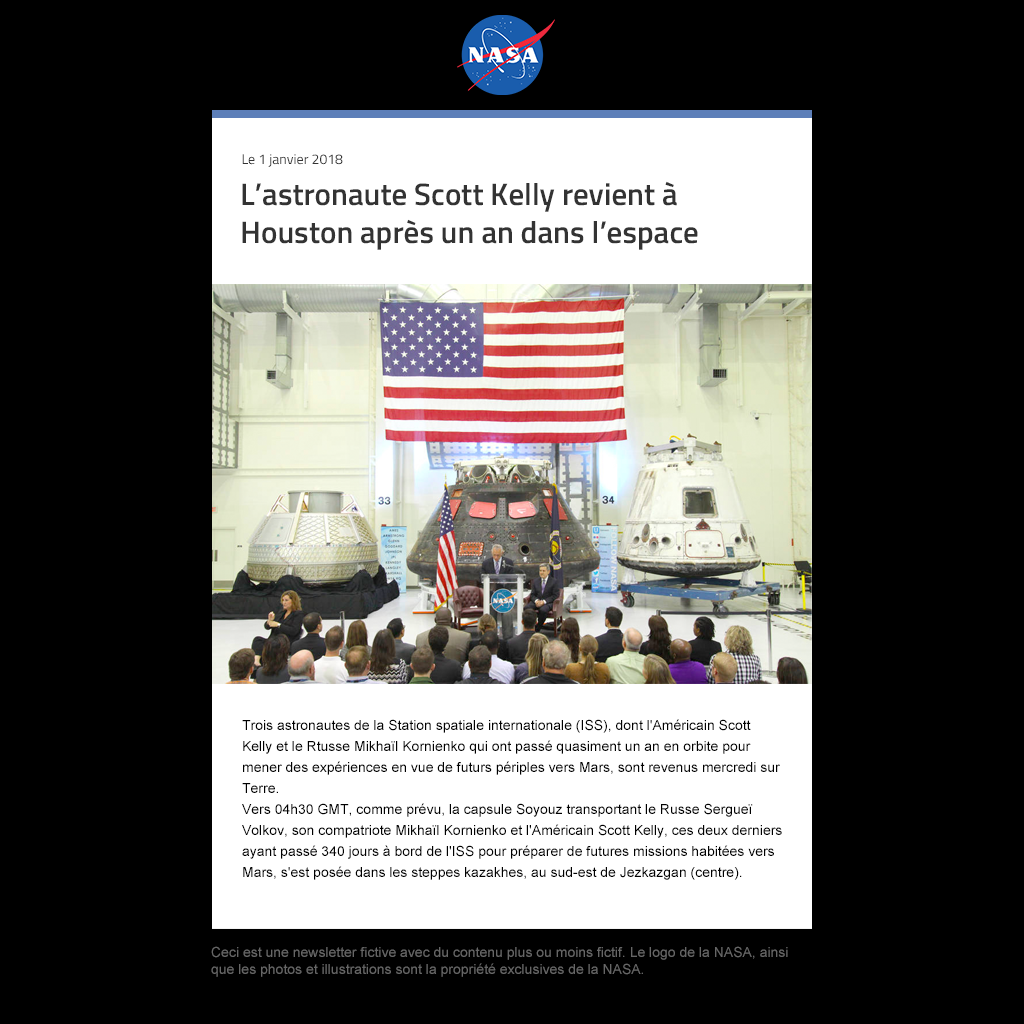
<style>
.page{position:relative;width:1024px;height:1024px;background:#000000}
.page>*{position:absolute;margin:0}
.t1{font:14px "TitilliumWeb-Regular";color:#333333}
.t2{font:31px "TitilliumWeb-SemiBold";color:#333333}
.t3{font:14px/21px "ArialMT";color:#000000}
.t4{font:14px "ArialMT";color:#666666}
</style>
<div class="page">
<p class="t1" style="left:242px;top:154px;width:101px;height:13px">Le 1 janvier 2018</p>
<p class="t2" style="left:242px;top:181px;width:456px;height:69px">L’astronaute Scott Kelly revient à Houston après un an dans l’espace</p>
<p class="t3" style="left:242px;top:719px;width:540px;height:161px">Trois astronautes de la Station spatiale internationale (ISS), dont l'Américain Scott Kelly et le Rtusse Mikhaïl Kornienko qui ont passé quasiment un an en orbite pour mener des expériences en vue de futurs périples vers Mars, sont revenus mercredi sur Terre. <br>Vers 04h30 GMT, comme prévu, la capsule Soyouz transportant le Russe Sergueï Volkov, son compatriote Mikhaïl Kornienko et l'Américain Scott Kelly, ces deux derniers ayant passé 340 jours à bord de l'ISS pour préparer de futures missions habitées vers Mars, s'est posée dans les steppes kazakhes, au sud-est de Jezkazgan (centre). <br>Alors qu'ils devaient sortir eux-mêmes du Soyouz pour imiter les conditions d'un atterrissage sur Mars, les astronautes ont échoué et dû recevoir l'aide des équipes d'évacuation pour s'extraire, a précisé le Centre de contrôle russe à l'agence de presse TASS.</p>
<p class="t4" style="left:211px;top:946px;width:577px;height:31px">Ceci est une newsletter fictive avec du contenu plus ou moins fictif. Le logo de la NASA, ainsi que les photos et illustrations sont la propriété exclusives de la NASA.</p>
</div>
